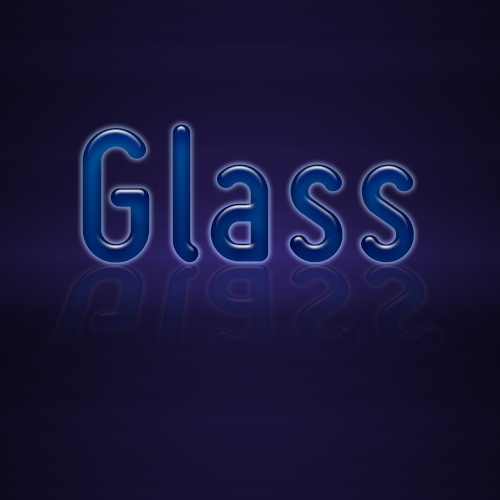
<style>
.page{position:relative;width:500px;height:500px}
.page>*{position:absolute;margin:0}
.t1{font:200px "Miso";color:#01286d;font-weight:bold}
</style>
<div class="page">
<p class="t1" style="left:82px;top:124px;width:332px;height:139px">Glass</p>
</div>
